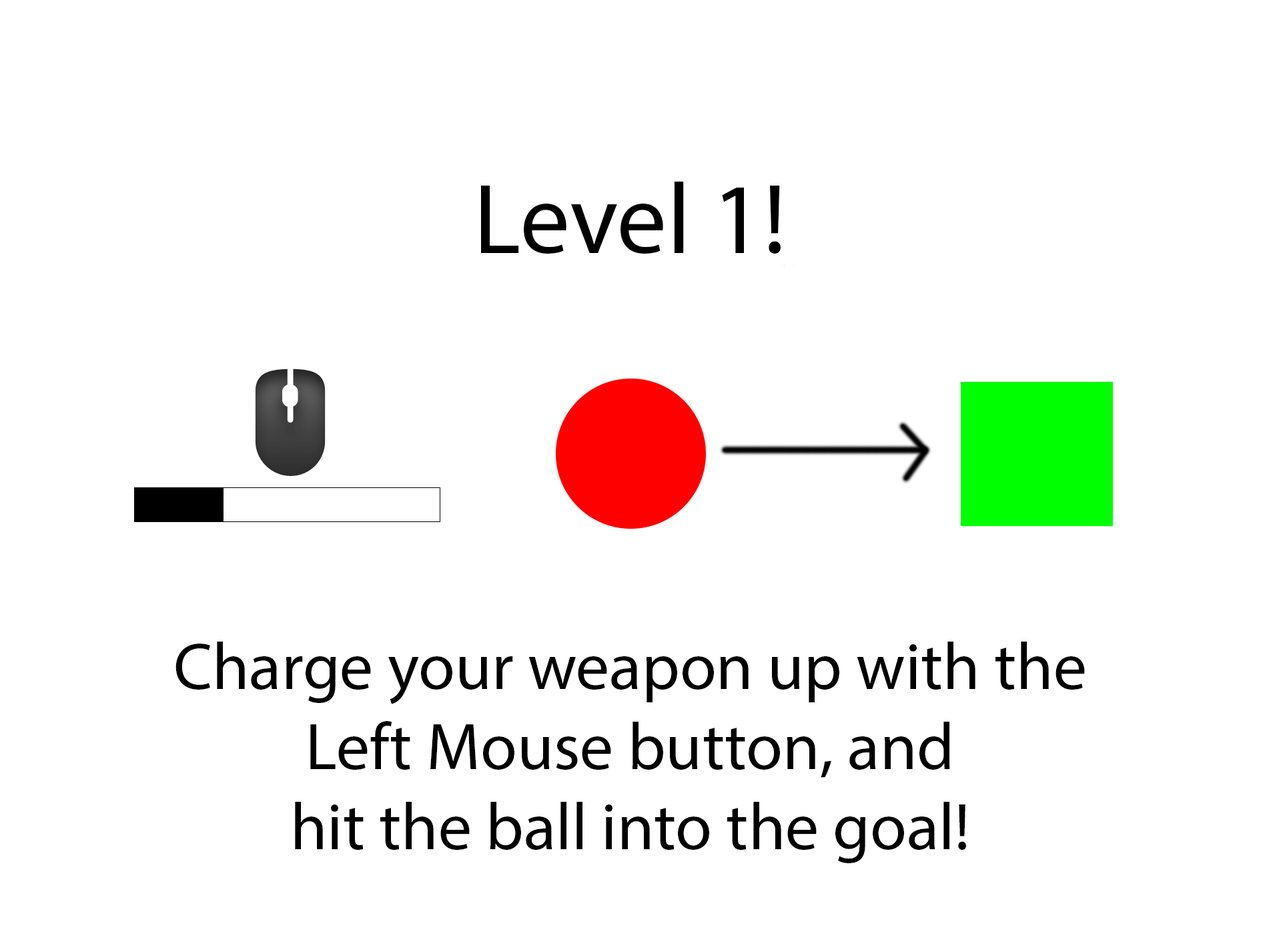
<style>
.page{position:relative;width:1261px;height:946px;background:#ffffff}
.page>*{position:absolute;margin:0}
.t1{font:100.1px "MyriadPro-Regular";color:#000000}
.t2{font:66.7px "MyriadPro-Regular";color:#000000}
</style>
<div class="page">
<p class="t1" style="left:481px;top:181px;width:300px;height:73px">Level 1!</p>
<p class="t2" style="left:175px;top:641px;width:910px;height:222px;text-align:center">Charge your weapon up with the <br>Left Mouse button, and <br>hit the ball into the goal!</p>
</div>
